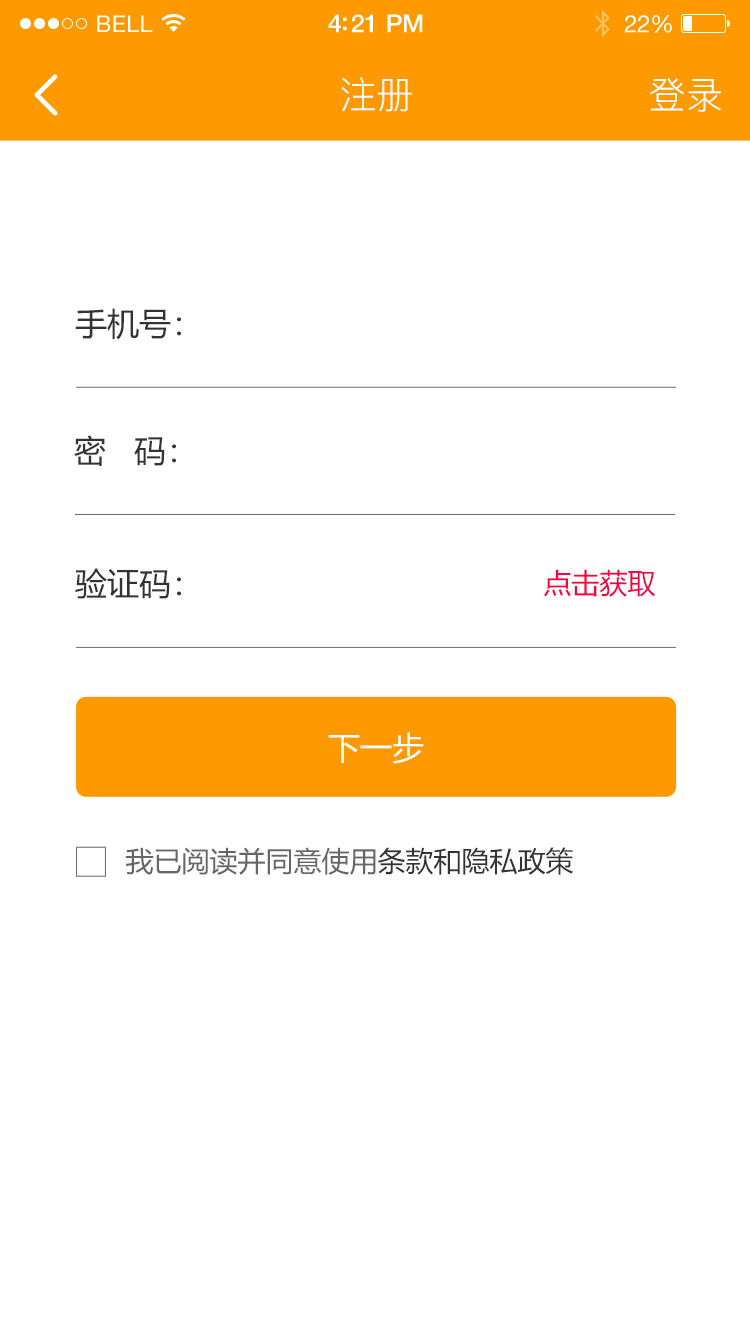
<style>
.page{position:relative;width:750px;height:1334px;background:#ffffff}
.page>*{position:absolute;margin:0}
.t1{font:23px "HelveticaNeue";letter-spacing:0.02em;color:#ffffff}
.t2{font:25px "HelveticaNeue-Medium";letter-spacing:-0.02em;color:#ffffff}
.t3{font:24px "HelveticaNeue";letter-spacing:-0.02em;color:#ffffff}
.t4{font:37.5px "PingFang-SC-Regular";color:#ffffff}
.t5{font:32px "MicrosoftYaHei";color:#333333}
.t6{font:28px "MicrosoftYaHei";color:#fe0041}
.t7{font:32px "MicrosoftYaHei";color:#ffffff}
.t8{font:28px "MicrosoftYaHei";color:#666666}
.t9{font:28px "MicrosoftYaHei";color:#333333}
</style>
<div class="page">
<p class="t1" style="left:97px;top:15px;width:56px;height:17px">BELL</p>
<p class="t2" style="left:328px;top:14px;width:95px;height:19px">4:21 PM</p>
<p class="t3" style="left:624px;top:15px;width:48px;height:18px">22%</p>
<p class="t4" style="left:341px;top:77px;width:71px;height:35px">注册</p>
<p class="t4" style="left:649px;top:78px;width:72px;height:34px">登录</p>
<p class="t5" style="left:75px;top:308px;width:106px;height:32px">手机号：</p>
<p class="t5" style="left:74px;top:435px;width:102px;height:31px">密   码：</p>
<p class="t5" style="left:75px;top:568px;width:106px;height:31px">验证码：</p>
<p class="t6" style="left:544px;top:569px;width:111px;height:28px">点击获取</p>
<p class="t7" style="left:328px;top:732px;width:96px;height:32px">下一步</p>
<p class="t8" style="left:125px;top:847px;width:448px;height:28px">我已阅读并同意使用<span class="t9">条款和隐私政策</span></p>
</div>
